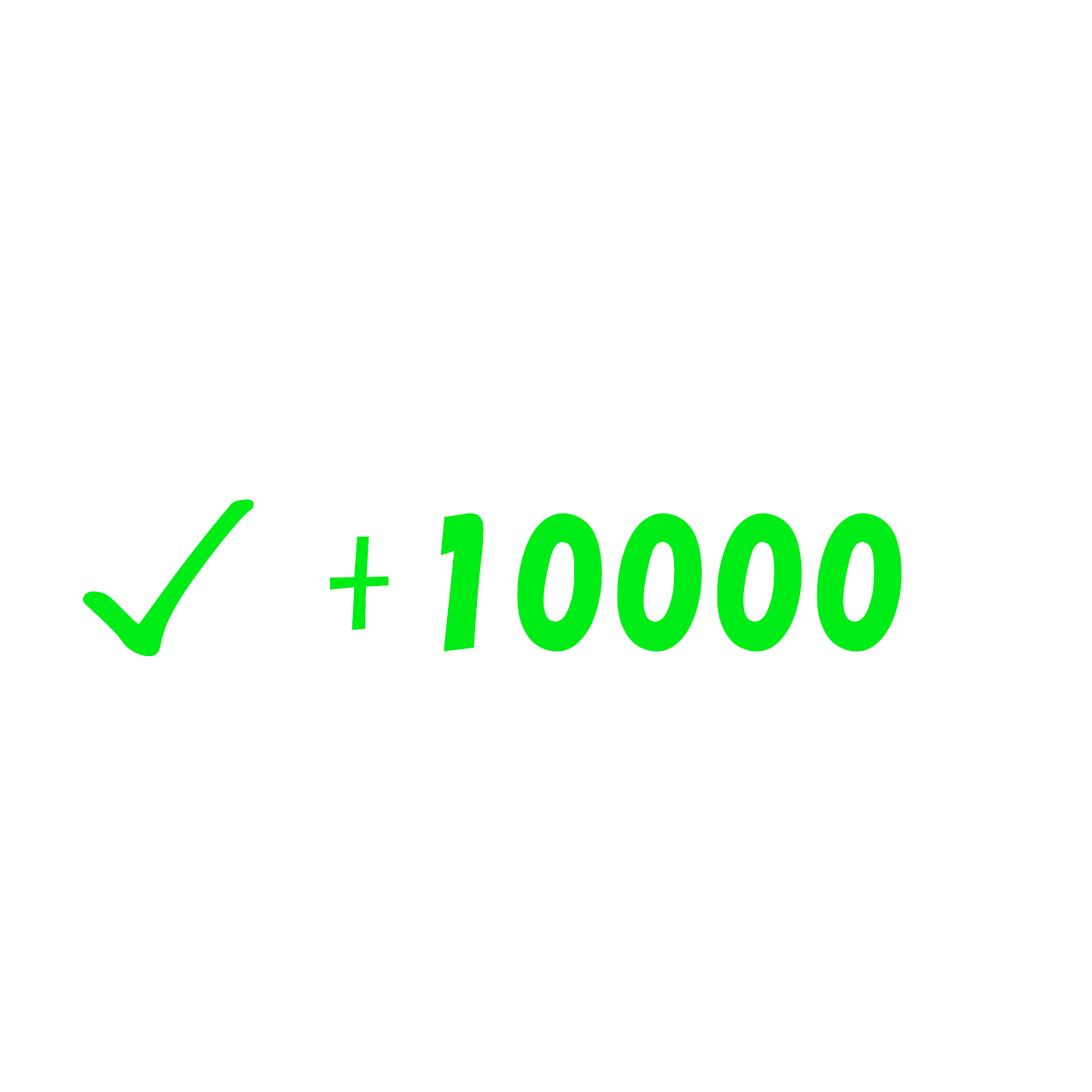
<style>
.page{position:relative;width:1092px;height:1092px;background:#ffffff}
.page>*{position:absolute;margin:0}
.t1{font:267.5px "KozGoPr6N-Regular";letter-spacing:0.025em;color:#00ec16;scale:1.07 1}
.t2{font:151.9px "HGPSoeiKakupoptai";letter-spacing:0.025em;color:#00ec16}
</style>
<div class="page">
<p class="t1" style="left:83px;top:499px;width:171px;height:158px">✓</p>
<p class="t2" style="left:329px;top:513px;width:573px;height:139px">+10000</p>
</div>
